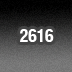
<style>
.page{position:relative;width:72px;height:72px}
.page>*{position:absolute;margin:0}
.t1{font:17.7px "HelveticaNeue-CondensedBold";color:#ffffff}
</style>
<div class="page">
<p class="t1" style="left:20px;top:29px;width:34px;height:13px">2616</p>
</div>
